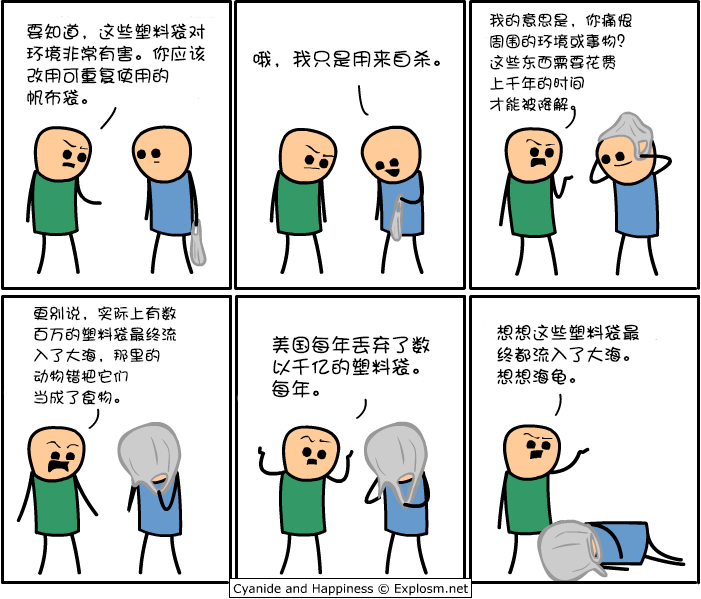
<style>
.page{position:relative;width:701px;height:599px;background:#ffffff}
.page>*{position:absolute;margin:0}
.t1{font:16px/21px "DFPShaoNvW5";color:#000000}
.t2{font:18px/22px "DFPShaoNvW5";color:#000000}
.t3{font:20px "DFPShaoNvW5";color:#000000}
.t4{font:20px/22px "DFPShaoNvW5";color:#000000}
</style>
<div class="page">
<p class="t1" style="left:489px;top:13px;width:143px;height:99px">我的意思是，你痛恨<br>周围的环境或事物？<br>这些东西需要花费<br>上千年的时间<br>才能被降解。</p>
<p class="t2" style="left:26px;top:23px;width:180px;height:83px">要知道，这些塑料袋对<br>环境非常有害。你应该<br>改用可重复使用的<br>帆布袋。</p>
<p class="t3" style="left:253px;top:49px;width:187px;height:19px">哦，我只是用来自杀。</p>
<p class="t1" style="left:33px;top:306px;width:143px;height:99px">更别说，实际上有数<br>百万的塑料袋最终流<br>入了大海，那里的<br>动物错把它们<br>当成了食物。</p>
<p class="t2" style="left:497px;top:324px;width:142px;height:61px">想想这些塑料袋最<br>终都流入了大海。<br>想想海龟。</p>
<p class="t4" style="left:272px;top:335px;width:158px;height:63px">美国每年丢弃了数<br>以千亿的塑料袋。<br>每年。</p>
</div>
